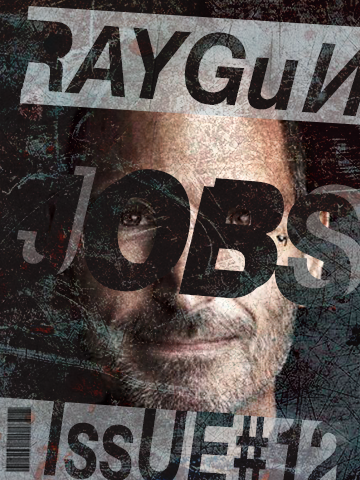
<style>
.page{position:relative;width:360px;height:480px}
.page>*{position:absolute;margin:0}
.t1{font:98px "HelveticaNeue-BoldItalic";color:#1d191a;scale:0.88 1}
.t2{font:153.6px "HelveticaNeue-BoldItalic";color:#1d191a;scale:0.85 1}
</style>
<div class="page">
<p class="t1" style="left:8px;top:19px;width:291px;height:92px;rotate:5deg">RAYGu</p>
<p class="t2" style="left:4px;top:173px;width:355px;height:134px;rotate:5deg">JOBS</p>
</div>
